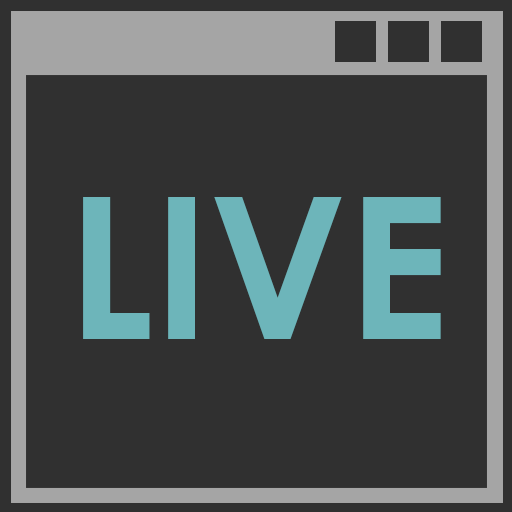
<style>
.page{position:relative;width:512px;height:512px;background:#303030}
.page>*{position:absolute;margin:0}
.t1{font:197px "CenturyGothic-Bold";color:#6db5ba}
</style>
<div class="page">
<p class="t1" style="left:83px;top:197px;width:358px;height:142px">LIVE</p>
</div>
